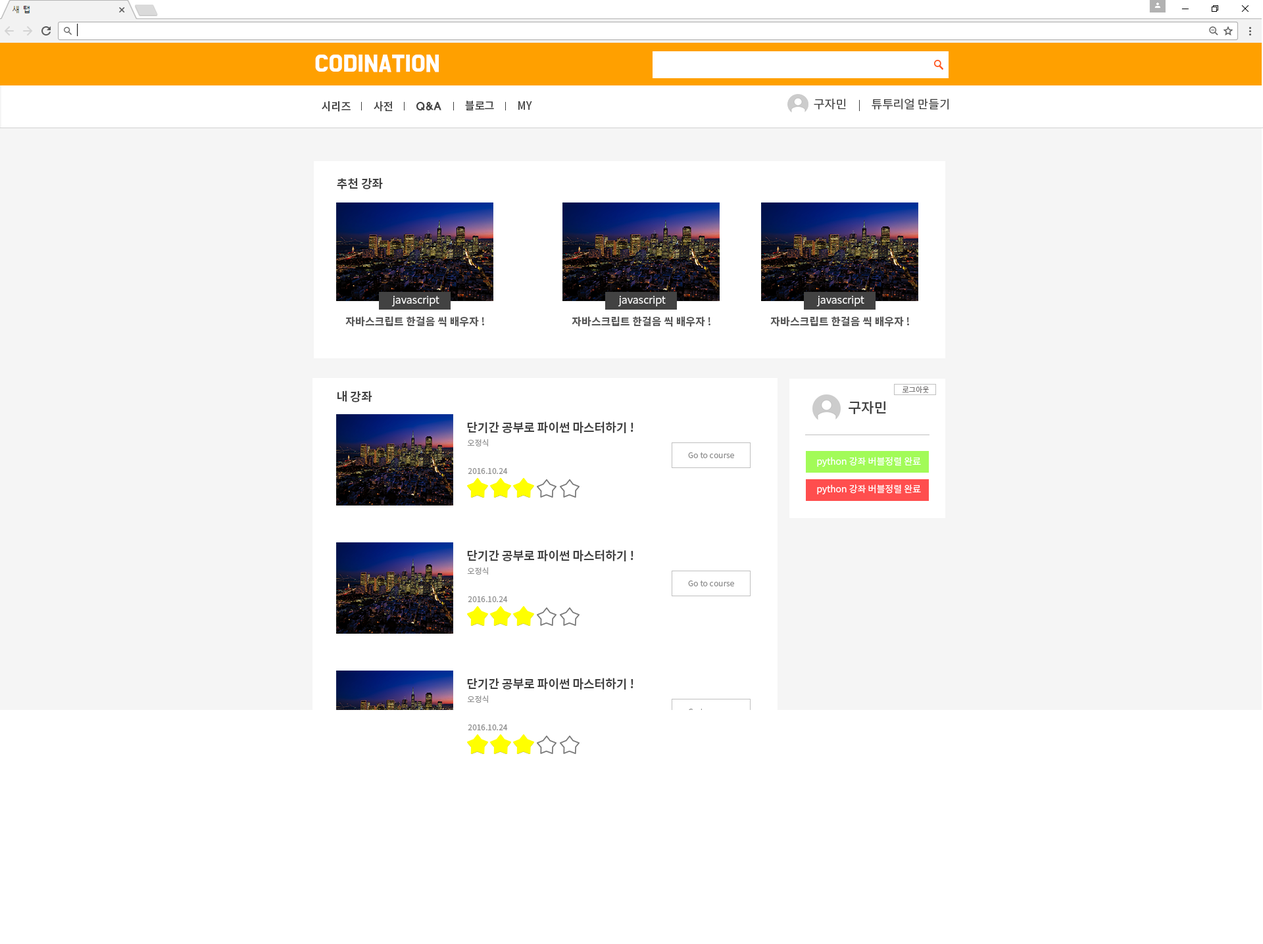
<style>
.page{position:relative;width:1263px;height:944px;background:#ffffff}
.page>*{position:absolute;margin:0}
.t1{font:19.7px "BMDoHyeon";color:#ffffff;font-weight:bold}
.t2{font:10.9px "NotoSansCJKkr-Medium";letter-spacing:-0.01em;color:#424242}
.t3{font:10.9px "HYwulB";letter-spacing:-0.025em;color:#424242}
.t4{font:11.8px "NotoSansCJKkr-Regular";color:#424242}
.t5{font:11.8px "NotoSansCJKkr-Bold";color:#424242}
.t6{font:10.4px "NotoSansCJKkr-DemiLight";color:#ffffff}
.t7{font:10.5px "NotoSansCJKkr-Bold";color:#565656}
.t8{font:7.3px "NotoSansCJKkr-DemiLight";color:#7a7878}
.t9{font:14.1px "NotoSansCJKkr-Medium";color:#424242}
.t10{font:7.9px "NotoSansCJKkr-Regular";color:#909090}
.t11{font:9.2px "NotoSansCJKkr-DemiLight";color:#ffffff}
</style>
<div class="page">
<p class="t1" style="left:315px;top:55px;width:124px;height:17px">CODINATION</p>
<p class="t2" style="left:322px;top:101px;width:29px;height:11px">시리즈</p>
<p class="t2" style="left:374px;top:101px;width:19px;height:11px">사전</p>
<p class="t3" style="left:416px;top:102px;width:25px;height:8px">Q&amp;A</p>
<p class="t2" style="left:465px;top:101px;width:29px;height:9px">블로그</p>
<p class="t2" style="left:518px;top:101px;width:14px;height:9px">MY</p>
<p class="t4" style="left:814px;top:99px;width:32px;height:11px">구자민</p>
<p class="t4" style="left:871px;top:99px;width:77px;height:11px">튜투리얼 만들기</p>
<p class="t5" style="left:337px;top:178px;width:46px;height:11px">추천 강좌</p>
<p class="t6" style="left:391px;top:296px;width:48px;height:10px">javascript</p>
<p class="t6" style="left:618px;top:296px;width:48px;height:10px">javascript</p>
<p class="t6" style="left:816px;top:296px;width:48px;height:10px">javascript</p>
<p class="t7" style="left:345px;top:316px;width:139px;height:11px">자바스크립트 한걸음 씩 배우자 !</p>
<p class="t7" style="left:571px;top:316px;width:139px;height:11px">자바스크립트 한걸음 씩 배우자 !</p>
<p class="t7" style="left:770px;top:316px;width:139px;height:11px">자바스크립트 한걸음 씩 배우자 !</p>
<p class="t8" style="left:902px;top:386px;width:27px;height:7px">로그아웃</p>
<p class="t5" style="left:337px;top:391px;width:35px;height:11px">내 강좌</p>
<p class="t9" style="left:848px;top:401px;width:38px;height:13px">구자민</p>
<p class="t5" style="left:467px;top:422px;width:166px;height:11px">단기간 공부로 파이썬 마스터하기 !</p>
<p class="t10" style="left:467px;top:439px;width:21px;height:8px">오정식</p>
<p class="t10" style="left:688px;top:452px;width:46px;height:6px">Go to course</p>
<p class="t11" style="left:817px;top:457px;width:104px;height:10px">python 강좌 버블정렬 완료</p>
<p class="t10" style="left:468px;top:468px;width:40px;height:6px">2016.10.24</p>
<p class="t11" style="left:817px;top:485px;width:104px;height:10px">python 강좌 버블정렬 완료</p>
<p class="t5" style="left:467px;top:550px;width:166px;height:12px">단기간 공부로 파이썬 마스터하기 !</p>
<p class="t10" style="left:467px;top:568px;width:21px;height:7px">오정식</p>
<p class="t10" style="left:688px;top:581px;width:46px;height:6px">Go to course</p>
<p class="t10" style="left:468px;top:596px;width:40px;height:6px">2016.10.24</p>
<p class="t5" style="left:467px;top:678px;width:166px;height:12px">단기간 공부로 파이썬 마스터하기 !</p>
<p class="t10" style="left:467px;top:696px;width:21px;height:7px">오정식</p>
<p class="t10" style="left:468px;top:725px;width:40px;height:6px">2016.10.24</p>
</div>
